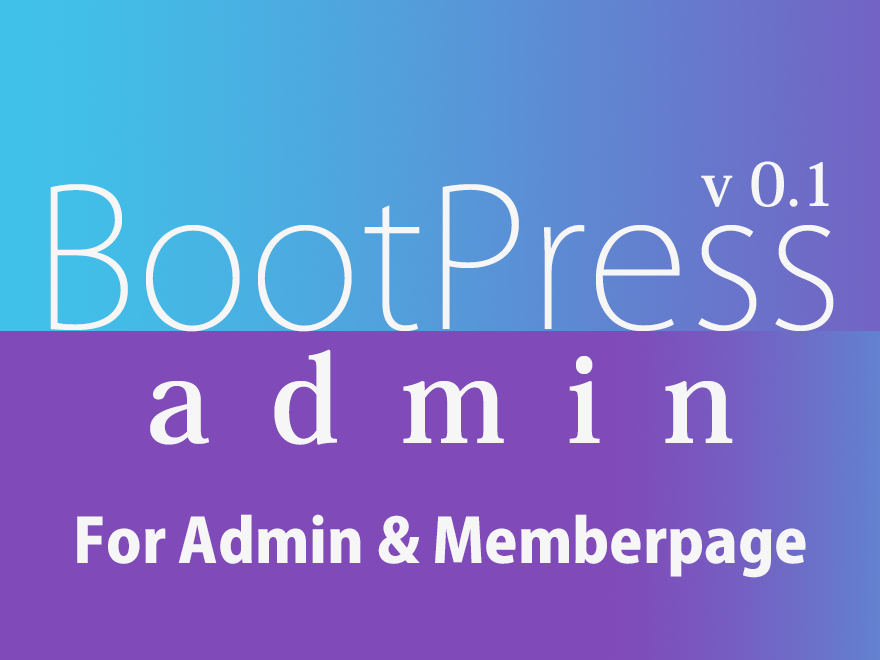
<style>
.page{position:relative;width:880px;height:660px;background:#804ab9}
.page>*{position:absolute;margin:0}
.t1{font:60px "KozMinPr6N-Bold";color:#f6f6f6}
.t2{font:190px "KozGoPr6N-ExtraLight";color:#f6f6f6}
.t3{font:120px "KozMinPr6N-Bold";letter-spacing:0.5em;color:#f6f6f6}
.t4{font:60px "KozGoPr6N-Heavy";color:#f6f6f6}
</style>
<div class="page">
<p class="t1" style="left:701px;top:161px;width:128px;height:46px">v 0.1</p>
<p class="t2" style="left:50px;top:184px;width:784px;height:148px">BootPress</p>
<p class="t3" style="left:150px;top:349px;width:583px;height:96px">admin</p>
<p class="t4" style="left:77px;top:514px;width:729px;height:64px">For Admin &amp; Memberpage</p>
</div>
